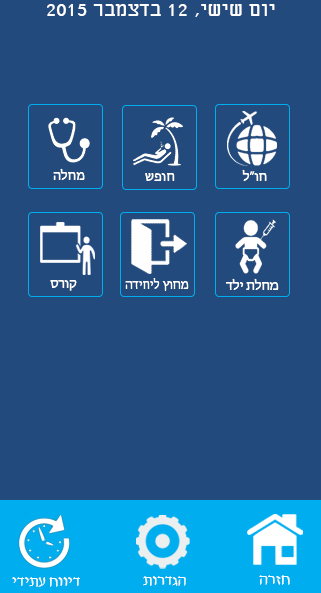
<style>
.page{position:relative;width:321px;height:593px;background:#234a7d}
.page>*{position:absolute;margin:0}
.t1{font:22px "Miriam";color:#ffffff}
.t2{font:14px "MyriadHebrew-Regular";color:#ffffff}
.t3{font:13px "MyriadHebrew-Regular";color:#ffffff}
.t4{font:16px "David";color:#ffffff}
</style>
<div class="page">
<p class="t1" style="left:47px;top:4px;width:228px;height:13px">2015 רבמצדב 12 ,ישיש םוי</p>
<p class="t2" style="left:53px;top:168px;width:32px;height:12px">הלחמ</p>
<p class="t2" style="left:145px;top:173px;width:30px;height:8px">שפוח</p>
<p class="t2" style="left:242px;top:169px;width:25px;height:12px">ל”וח</p>
<p class="t2" style="left:50px;top:280px;width:27px;height:11px">סרוק</p>
<p class="t3" style="left:125px;top:278px;width:64px;height:13px">הדיחיל ץוחמ</p>
<p class="t2" style="left:226px;top:278px;width:53px;height:12px">דלי תלחמ</p>
<p class="t4" style="left:12px;top:577px;width:68px;height:10px">ידיתע חוויד</p>
<p class="t4" style="left:143px;top:576px;width:43px;height:10px">תורדגה</p>
<p class="t4" style="left:259px;top:575px;width:31px;height:10px">הרזח</p>
</div>
